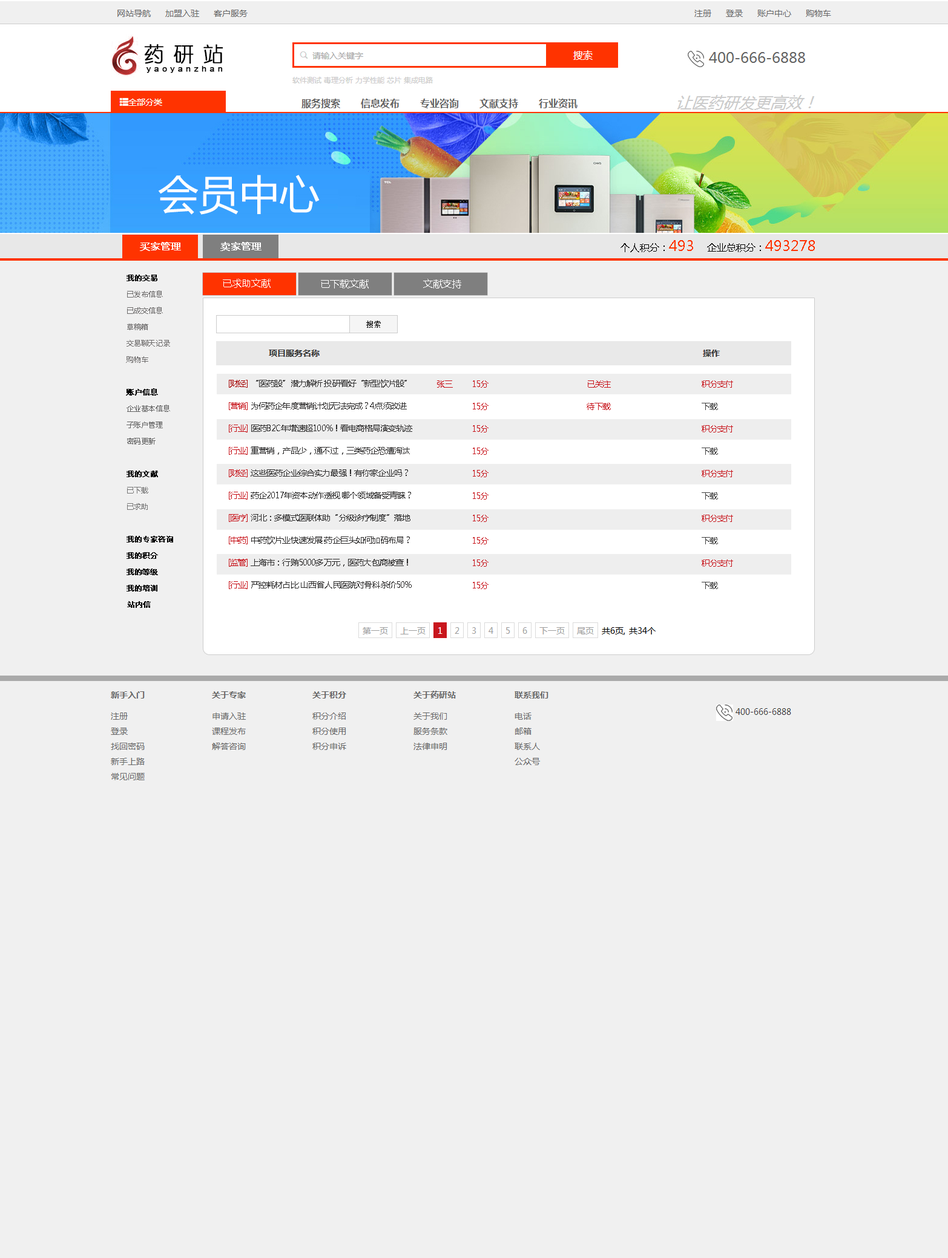
<style>
.page{position:relative;width:948px;height:1258px;background:#f0f0f0}
.page>*{position:absolute;margin:0}
.t1{font:9.7px "MicrosoftYaHei";color:#ffffff;font-weight:bold}
.t2{font:9.7px "MicrosoftYaHei";color:#000000}
.t3{font:14.5px "MicrosoftYaHei";color:#ff3300}
.t4{font:7.3px/16.3px "MicrosoftYaHei";color:#6e6c6c}
.t5{font:7.3px/16.3px "MicrosoftYaHei";color:#000000}
.t6{font:7.3px/16.3px "MicrosoftYaHei";color:#000000;font-weight:bold}
.t7{font:7.3px/16.3px "MicrosoftYaHei";color:#636363}
.t8{font:7.3px/16.3px "MicrosoftYaHei";color:#777777}
.t9{font:7.3px/16.3px "MicrosoftYaHei";color:#010101;font-weight:bold}
.t10{font:9.7px "MicrosoftYaHei";color:#ffffff}
.t11{font:8.5px/22.4px "MicrosoftYaHei";letter-spacing:-0.06em;color:#2d2c2c}
.t12{font:8.5px/22.4px "MicrosoftYaHei";letter-spacing:-0.06em;color:#a70505}
.t13{font:8.5px/22.4px "MicrosoftYaHei";letter-spacing:-0.06em;color:#c8161d}
.t14{font:8.5px "MicrosoftYaHei";letter-spacing:-0.06em;color:#c8161d}
.t15{font:8.5px/22.4px "MicrosoftYaHei";letter-spacing:-0.06em;color:#3d3d3d}
</style>
<div class="page">
<p class="t1" style="left:140px;top:242px;width:41px;height:9px">买家管理</p>
<p class="t1" style="left:220px;top:242px;width:41px;height:9px">卖家管理</p>
<p class="t2" style="left:620px;top:240px;width:194px;height:12px">个人积分：<span class="t3">493   </span>企业总积分：<span class="t3">493278</span></p>
<p class="t4" style="left:126px;top:275px;width:47px;height:333px"><span class="t5">    </span><span class="t6">我的交易<br>    </span>已发布信息<br>    已成交信息<br>    草稿箱<br>    交易聊天记录<br>    购物车<br><br>    <span class="t6">账户信息<br>    </span><span class="t7">企业基本信息<br>    子账户管理<br>    密码更新<br><br>    </span><span class="t6">我的文献<br>    </span><span class="t8">已下载<br>    已求助<br><br>    </span><span class="t6">我的专家咨询<br>    </span><span class="t9">我的积分<br>    我的等级<br>    我的培训<br>   </span><span class="t6"> 站内信</span></p>
<p class="t10" style="left:223px;top:278px;width:47px;height:10px">已求助文献</p>
<p class="t10" style="left:321px;top:279px;width:47px;height:10px">已下载文献</p>
<p class="t10" style="left:423px;top:279px;width:38px;height:10px">文献支持</p>
<p class="t11" style="left:229px;top:379px;width:183px;height:210px"><span class="t12">[财经]</span> “医药股”潜力解析 投研看好“新型饮片股”<br><span class="t13">[营销] </span>为何药企年度营销计划无法完成？4点须改进<br><span class="t13">[行业]</span> 医药B2C年增速超100%！看电商格局演变轨迹<br><span class="t13">[行业]</span> 重营销，产品少，通不过，三类药企恐遭淘汰<br><span class="t13">[财经] </span>这些医药企业综合实力最强！有你家企业吗？<br><span class="t13">[行业]</span> 药企2017年资本动作透视 哪个领域备受青睐？<br><span class="t13">[医疗]</span> 河北：多模式医联体助“分级诊疗制度”落地<br><span class="t13">[中药] </span>中药饮片业快速发展 药企巨头如何加码布局？<br><span class="t13">[监管] </span>上海市：行贿5000多万元，医药大包商被查！<br><span class="t13">[行业]</span> 严控耗材占比 山西省人民医院对骨科杀价50%</p>
<p class="t14" style="left:437px;top:381px;width:16px;height:7px">张三</p>
<p class="t13" style="left:473px;top:381px;width:15px;height:208px">15分<br>15分<br>15分<br>15分<br>15分<br>15分<br>15分<br>15分<br>15分<br>15分</p>
<p class="t13" style="left:586px;top:381px;width:24px;height:29px">已关注<br>待下载</p>
<p class="t13" style="left:701px;top:381px;width:32px;height:208px">积分支付   <span class="t15"><br>下载<br></span>积分支付   <span class="t15"><br>下载<br></span>积分支付   <span class="t15"><br>下载<br></span>积分支付   <span class="t15"><br>下载<br></span>积分支付   <span class="t15"><br>下载</span></p>
</div>
